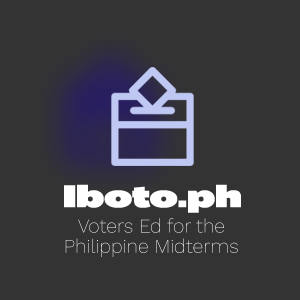
<style>
.page{position:relative;width:300px;height:300px;background:#333333}
.page>*{position:absolute;margin:0}
.t1{font:30.6px "Favela-Black";color:#ffffff}
.t2{font:19.5px/20.2px "WorkSans-ExtraLight"}
</style>
<div class="page">
<p class="t1" style="left:64px;top:184px;width:177px;height:29px">Iboto.ph</p>
<p class="t2" style="left:65px;top:218px;width:173px;height:39px;text-align:center">Voters Ed for the<br>Philippine Midterms</p>
</div>
